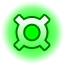
<style>
.page{position:relative;width:64px;height:64px;background:#ffffff}
.page>*{position:absolute;margin:0}
.t1{font:66.1px "TrebuchetMS-Bold"}
</style>
<div class="page">
<p class="t1" style="left:15px;top:15px;width:34px;height:35px">¤</p>
</div>
